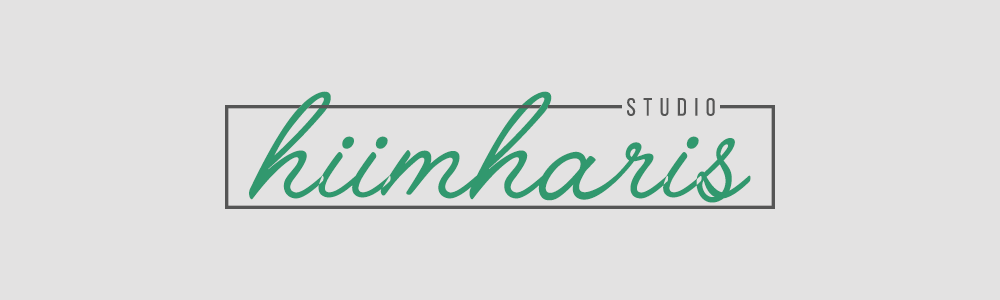
<style>
.page{position:relative;width:1000px;height:300px;background:#e3e2e2}
.page>*{position:absolute;margin:0}
.t1{font:200px "Angelface";color:#31986e}
.t2{font:25px "BebasNeueRegular";letter-spacing:0.3em;color:#555555}
</style>
<div class="page">
<p class="t1" style="left:249px;top:91px;width:502px;height:112px">hiimharis</p>
<p class="t2" style="left:627px;top:98px;width:88px;height:18px">Studio</p>
</div>
